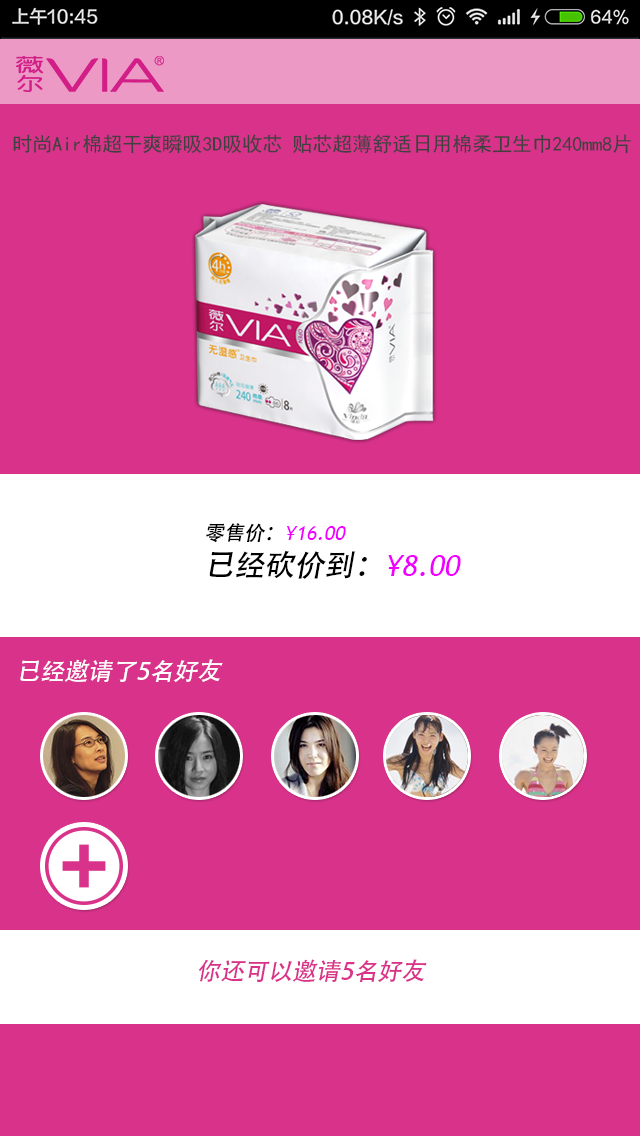
<style>
.page{position:relative;width:640px;height:1136px;background:#d9328a}
.page>*{position:absolute;margin:0}
.t1{font:20px "SimHei";color:#404040}
.t2{font:20px "TrebuchetMS";color:#f000ff;font-style:italic}
.t3{font:20px "AdobeHeitiStd-Regular";color:#010101;font-style:italic}
.t4{font:30px "AdobeHeitiStd-Regular";color:#000000;font-style:italic}
.t5{font:30px "TrebuchetMS";color:#f000ff;font-style:italic}
.t6{font:24px "AdobeHeitiStd-Regular";color:#ffffff;font-style:italic}
.t7{font:24px "AdobeHeitiStd-Regular";color:#d9328a;font-style:italic}
</style>
<div class="page">
<p class="t1" style="left:13px;top:134px;width:618px;height:20px">时尚Air棉超干爽瞬吸3D吸收芯 贴芯超薄舒适日用棉柔卫生巾240mm8片</p>
<p class="t2" style="left:206px;top:523px;width:255px;height:56px"><span class="t3">零售价：</span>¥16.00<br><span class="t4">已经砍价到：</span><span class="t5">¥8.00</span></p>
<p class="t6" style="left:20px;top:659px;width:203px;height:24px">已经邀请了5名好友</p>
<p class="t7" style="left:199px;top:959px;width:228px;height:24px">你还可以邀请5名好友</p>
</div>
